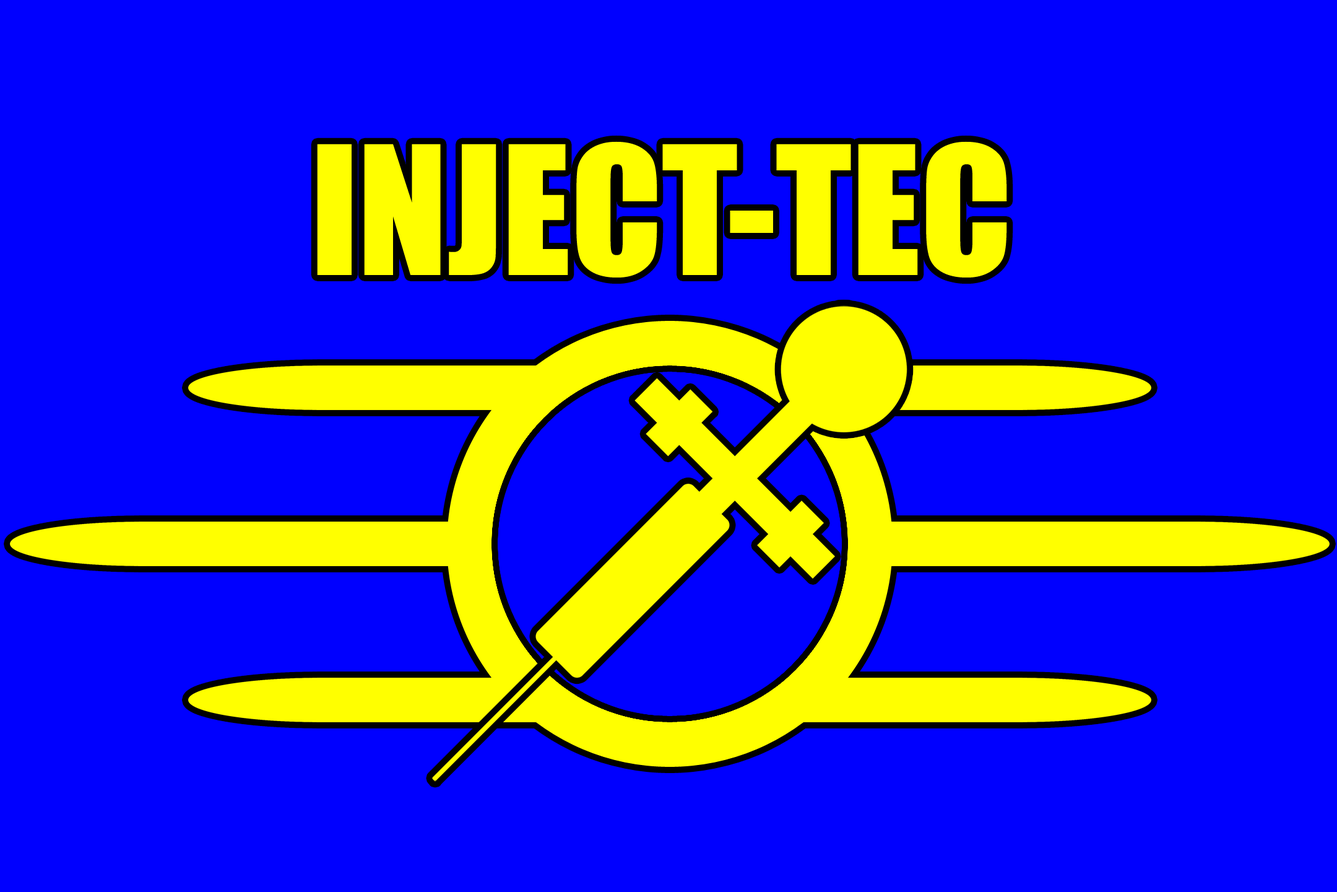
<style>
.page{position:relative;width:1337px;height:892px;background:#0000ff}
.page>*{position:absolute;margin:0}
.t1{font:165.1px "Impact";color:#ffff00}
</style>
<div class="page">
<p class="t1" style="left:317px;top:141px;width:690px;height:136px">INJECT-TEC</p>
</div>
